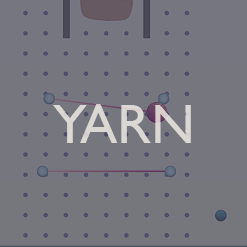
<style>
.page{position:relative;width:247px;height:247px;background:#76767d}
.page>*{position:absolute;margin:0}
.t1{font:55.8px "GillSansMT";color:#f3ede4;text-transform:uppercase}
</style>
<div class="page">
<p class="t1" style="left:53px;top:104px;width:138px;height:39px;opacity:0.32">Yarn</p>
<p class="t1" style="left:53px;top:104px;width:138px;height:39px;opacity:0.64">Yarn</p>
</div>
